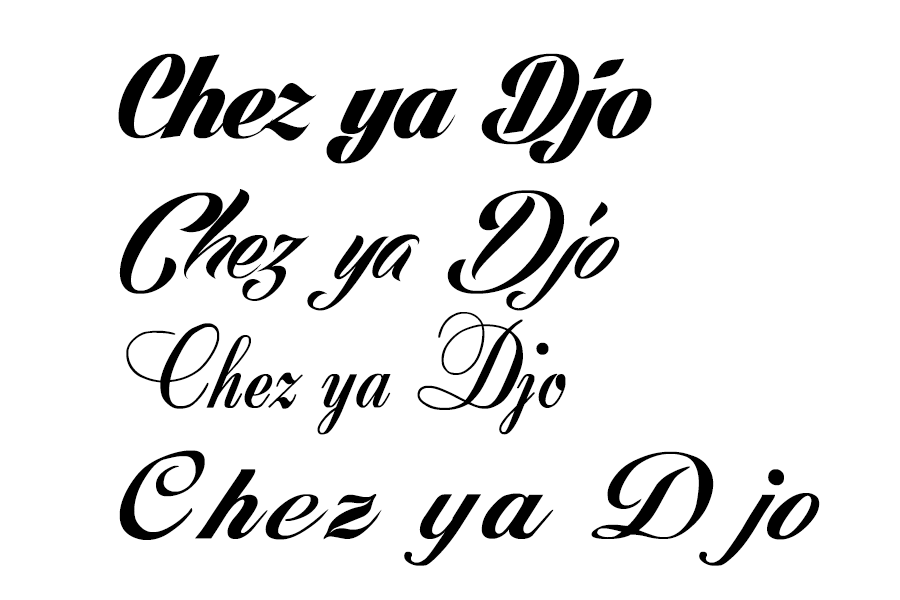
<style>
.page{position:relative;width:900px;height:600px;background:#ffffff}
.page>*{position:absolute;margin:0}
.t1{font:125px "LighthousePersonalUse";color:#000000}
.t2{font:125px "EchinosParkScript-PERSONALUSEON";color:#000000}
.t3{font:125px "Anette";color:#000000}
.t4{font:125px "Alison-Regular";color:#000000}
</style>
<div class="page">
<p class="t1" style="left:118px;top:53px;width:534px;height:111px">Chez ya Djo</p>
<p class="t2" style="left:119px;top:189px;width:501px;height:122px">Chez ya Djo</p>
<p class="t3" style="left:126px;top:312px;width:440px;height:123px">Chez ya Djo</p>
<p class="t4" style="left:119px;top:450px;width:701px;height:116px">Chez ya Djo</p>
</div>
